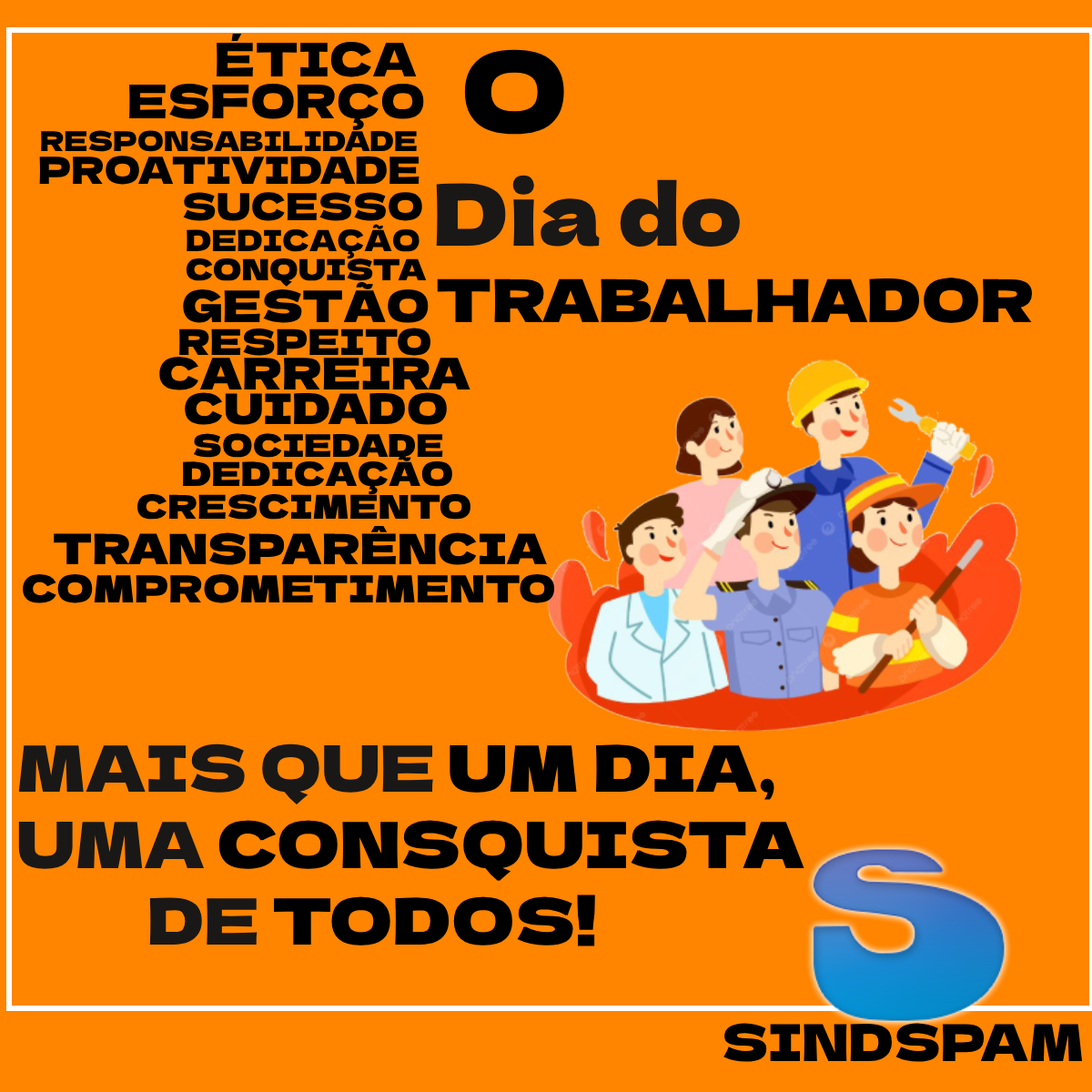
<style>
.page{position:relative;width:1092px;height:1092px;background:#ff8400}
.page>*{position:absolute;margin:0}
.t1{font:46.4px "DelaGothicOne-Regular";color:#000000}
.t2{font:111px "DelaGothicOne-Regular";color:#000000}
.t3{font:27.3px "DelaGothicOne-Regular";color:#000000}
.t4{font:37.3px "DelaGothicOne-Regular";color:#000000}
.t5{font:84.6px "DelaGothicOne-Regular";color:#191817}
.t6{font:29.1px "DelaGothicOne-Regular";color:#000000}
.t7{font:29.1px "DelaGothicOne-Regular";color:#000000;font-weight:bold}
.t8{font:43.7px "DelaGothicOne-Regular";color:#000000;font-weight:bold}
.t9{font:59.1px "DelaGothicOne-Regular";color:#000000;font-weight:bold}
.t10{font:35.5px "DelaGothicOne-Regular";color:#000000;font-weight:bold}
.t11{font:41.9px "DelaGothicOne-Regular";color:#000000;font-weight:bold}
.t12{font:30.9px "DelaGothicOne-Regular";color:#000000;font-weight:bold}
.t13{font:32.8px "DelaGothicOne-Regular";color:#000000;font-weight:bold}
.t14{font:37.3px "DelaGothicOne-Regular";color:#000000;font-weight:bold}
.t15{font:63.7px "DelaGothicOne-Regular";color:#000000;font-weight:bold}
.t16{font:63.7px "DelaGothicOne-Regular";color:#191817}
.t17{font:63.7px "DelaGothicOne-Regular";color:#000000}
.t18{font:50.7px "DelaGothicOne-Regular";color:#000000}
</style>
<div class="page">
<p class="t1" style="left:217px;top:34px;width:200px;height:43px">ÉTICA</p>
<p class="t2" style="left:464px;top:49px;width:100px;height:86px">O</p>
<p class="t1" style="left:129px;top:83px;width:295px;height:48px">ESFORÇO</p>
<p class="t3" style="left:41px;top:130px;width:376px;height:22px">RESPONSABILIDADE</p>
<p class="t4" style="left:39px;top:156px;width:381px;height:29px">PROATIVIDADE</p>
<p class="t5" style="left:436px;top:175px;width:304px;height:72px">Dia do</p>
<p class="t4" style="left:183px;top:192px;width:239px;height:29px">SUCESSO</p>
<p class="t6" style="left:187px;top:224px;width:233px;height:35px">DEDICAÇÃO</p>
<p class="t7" style="left:186px;top:258px;width:241px;height:29px">CONQUISTA</p>
<p class="t8" style="left:183px;top:281px;width:246px;height:42px">GESTÃO</p>
<p class="t9" style="left:437px;top:278px;width:596px;height:45px">TRABALHADOR</p>
<p class="t10" style="left:179px;top:328px;width:252px;height:28px">RESPEITO</p>
<p class="t8" style="left:159px;top:357px;width:311px;height:33px">CARREIRA</p>
<p class="t11" style="left:185px;top:392px;width:262px;height:33px">CUIDADO</p>
<p class="t12" style="left:193px;top:433px;width:250px;height:25px">SOCIEDADE</p>
<p class="t13" style="left:182px;top:455px;width:270px;height:40px">DEDICAÇÃO</p>
<p class="t13" style="left:136px;top:494px;width:334px;height:26px">CRESCIMENTO</p>
<p class="t11" style="left:54px;top:526px;width:493px;height:39px">TRANSPARÊNCIA</p>
<p class="t14" style="left:23px;top:574px;width:532px;height:29px">COMPROMETIMENTO</p>
<p class="t15" style="left:18px;top:743px;width:786px;height:203px"><span class="t16">MAIS QUE </span>UM DIA<span class="t17">,<br></span><span class="t16">UMA </span>CONSQUISTA<br>    <span class="t16">DE </span>TODOS!</p>
<p class="t18" style="left:723px;top:1023px;width:359px;height:39px">SINDSPAM</p>
</div>
